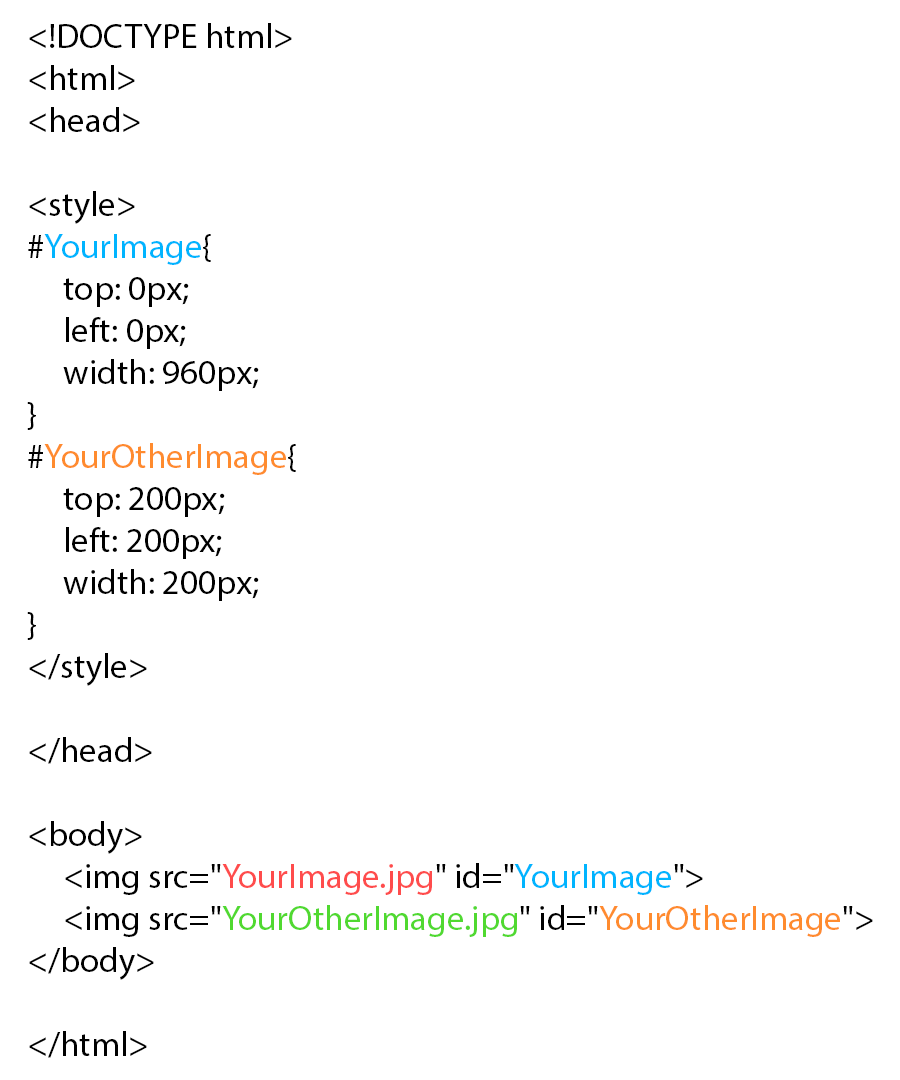
<style>
.page{position:relative;width:900px;height:1080px;background:#ffffff}
.page>*{position:absolute;margin:0}
.t1{font:35px "MyriadPro-Regular";color:#000000}
.t2{font:35px "MyriadPro-Regular";color:#00b4ff}
.t3{font:35px "MyriadPro-Regular";color:#ff8b2e}
.t4{font:35px "MyriadPro-Regular";color:#ff4c4c}
.t5{font:35px "MyriadPro-Regular";color:#50d930}
</style>
<div class="page">
<p class="t1" style="left:27px;top:23px;width:846px;height:1035px">&lt;!DOCTYPE html&gt;<br>&lt;html&gt;<br>&lt;head&gt;<br><br>&lt;style&gt;<br>#<span class="t2">YourImage</span>{<br> top: 0px;<br> left: 0px;<br> width: 960px;<br>}<br>#<span class="t3">YourOtherImage</span>{<br> top: 200px;<br> left: 200px;<br> width: 200px;<br>}<br>&lt;/style&gt;<br><br>&lt;/head&gt;<br><br>&lt;body&gt;<br> &lt;img src="<span class="t4">YourImage.jpg</span>" id="<span class="t2">YourImage</span>"&gt; <br> &lt;img src="<span class="t5">YourOtherImage.jpg</span>" id="<span class="t3">YourOtherImage</span>"&gt; <br>&lt;/body&gt;<br><br>&lt;/html&gt;</p>
</div>
